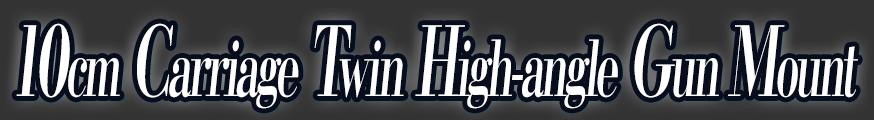
<style>
.page{position:relative;width:874px;height:120px;background:#333333}
.page>*{position:absolute;margin:0}
.t1{font:76.8px "KochoStd-Heavy";letter-spacing:-0.08em;color:#ffffff;font-style:italic;scale:0.57 1}
.t2{font:96px "KochoStd-Heavy";letter-spacing:-0.08em;color:#ffffff;font-style:italic;scale:0.57 1}
</style>
<div class="page">
<p class="t1" style="left:16px;top:23px;width:842px;height:86px"><span class="t2">10</span>cm<span class="t2"> C</span>arriage<span class="t2"> T</span>win<span class="t2"> H</span>igh-angle<span class="t2"> G</span>un <span class="t2">M</span>ount</p>
</div>
